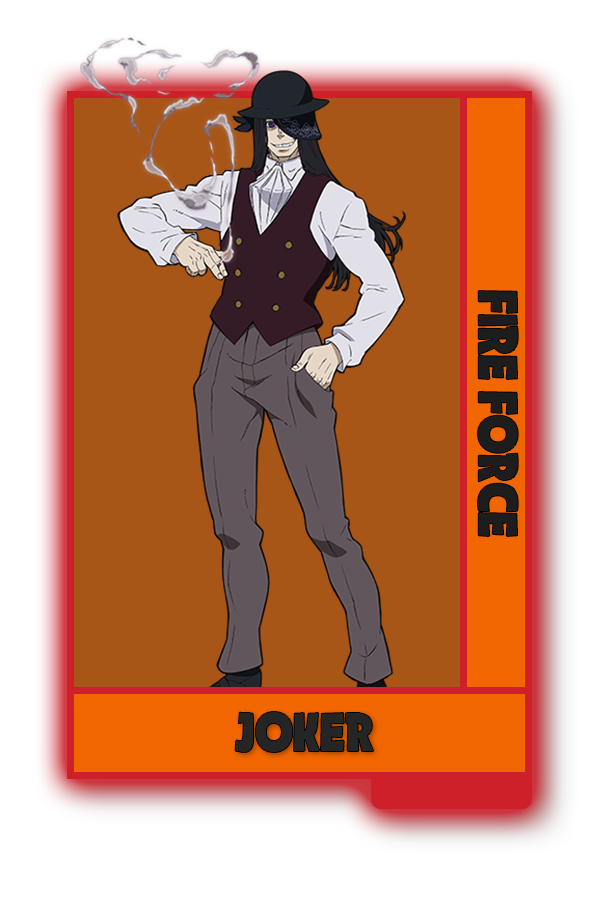
<style>
.page{position:relative;width:600px;height:900px;background:#a85518}
.page>*{position:absolute;margin:0}
.t1{font:69.6px "AristonComicDemo-Regular";color:#1d1d1d}
.t2{font:69.1px "AristonComicDemo-Regular";color:#252525}
</style>
<div class="page">
<p class="t1" style="left:478px;top:291px;width:40px;height:245px;rotate:90deg">FIRE FORCE</p>
<p class="t2" style="left:235px;top:712px;width:139px;height:40px">JOKER</p>
</div>
